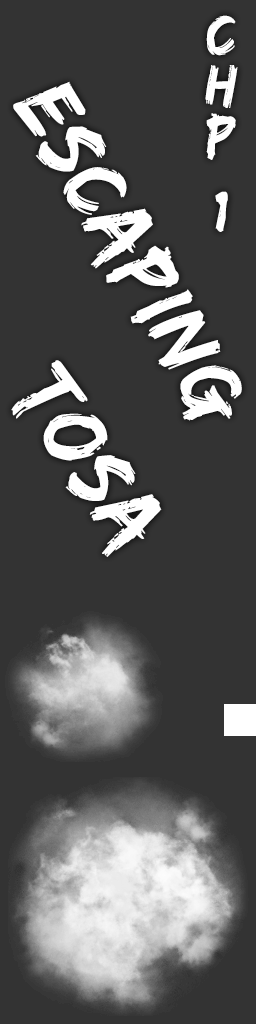
<style>
.page{position:relative;width:256px;height:1024px;background:#333333}
.page>*{position:absolute;margin:0}
.t1{font:60px/25.1px "EdoSZ";letter-spacing:0.03em;color:#ffffff}
.t2{font:91.3px "EdoSZ";letter-spacing:0.03em;color:#ffffff;scale:0.96 1}
</style>
<div class="page">
<p class="t1" style="left:205px;top:15px;width:33px;height:217px;text-align:center">C<br><br>H<br><br>P<br><br><br>1</p>
<p class="t2" style="left:13px;top:81px;width:229px;height:340px;rotate:60deg">Escaping</p>
<p class="t2" style="left:11px;top:360px;width:151px;height:197px;rotate:56deg">TOSA</p>
</div>
